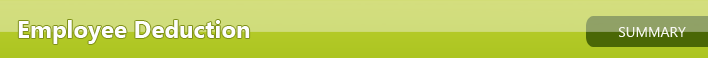
<style>
.page{position:relative;width:708px;height:58px}
.page>*{position:absolute;margin:0}
.t1{font:24px "SegoeUI-Bold";color:#fefefe}
.t2{font:14px "SegoeUI";color:#f6f7f1}
</style>
<div class="page">
<p class="t1" style="left:18px;top:20px;width:232px;height:24px">Employee Deduction</p>
<p class="t2" style="left:619px;top:27px;width:67px;height:10px">SUMMARY</p>
</div>
